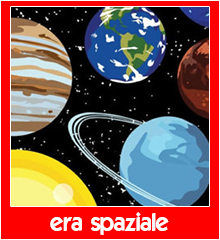
<style>
.page{position:relative;width:220px;height:240px;background:#ff0000}
.page>*{position:absolute;margin:0}
.t1{font:24px "ELEGANCE";color:#ffffff}
</style>
<div class="page">
<p class="t1" style="left:50px;top:212px;width:119px;height:23px">era spaziale</p>
</div>
